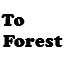
<style>
.page{position:relative;width:64px;height:64px;background:#ffffff}
.page>*{position:absolute;margin:0}
.t1{font:18px "CooperBlack";color:#030303}
</style>
<div class="page">
<p class="t1" style="left:1px;top:14px;width:62px;height:33px">To<br>Forest</p>
</div>
